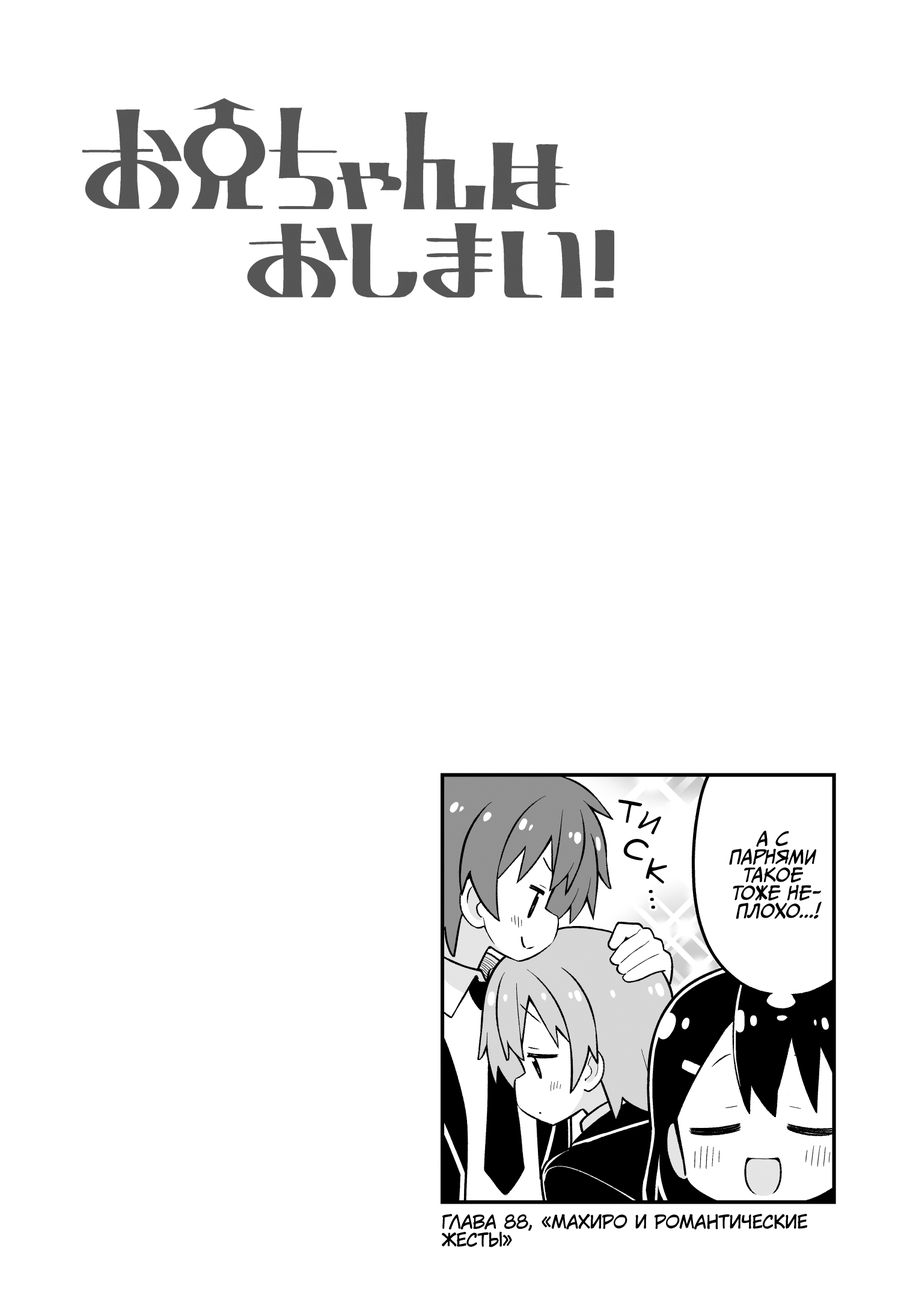
<style>
.page{position:relative;width:919px;height:1298px;background:#ffffff}
.page>*{position:absolute;margin:0}
.t1{font:28.8px "v_Augie";color:#000000;text-transform:uppercase;font-weight:bold}
.t2{font:18px "CCMeanwhile";color:#000000;text-transform:uppercase;font-style:italic}
.t3{font:18px "KuraiVoice2";color:#000000;text-transform:uppercase}
</style>
<div class="page">
<p class="t1" style="left:618px;top:799px;width:24px;height:24px;rotate:15deg">т</p>
<p class="t1" style="left:638px;top:811px;width:23px;height:24px;rotate:29deg">и</p>
<p class="t2" style="left:729px;top:830px;width:92px;height:89px;text-align:center">А с<br>парнями<br>такое<br>тоже не-<br>плохо...!</p>
<p class="t1" style="left:623px;top:839px;width:26px;height:21px;rotate:26deg">с</p>
<p class="t1" style="left:645px;top:857px;width:22px;height:27px;rotate:16deg">к</p>
<p class="t1" style="left:648px;top:890px;width:5px;height:4px">.</p>
<p class="t1" style="left:650px;top:898px;width:4px;height:3px">.</p>
<p class="t1" style="left:651px;top:906px;width:4px;height:3px">.</p>
<p class="t3" style="left:442px;top:1214px;width:365px;height:33px">Глава 88, «Махиро и романтические<br>жесты»</p>
</div>
